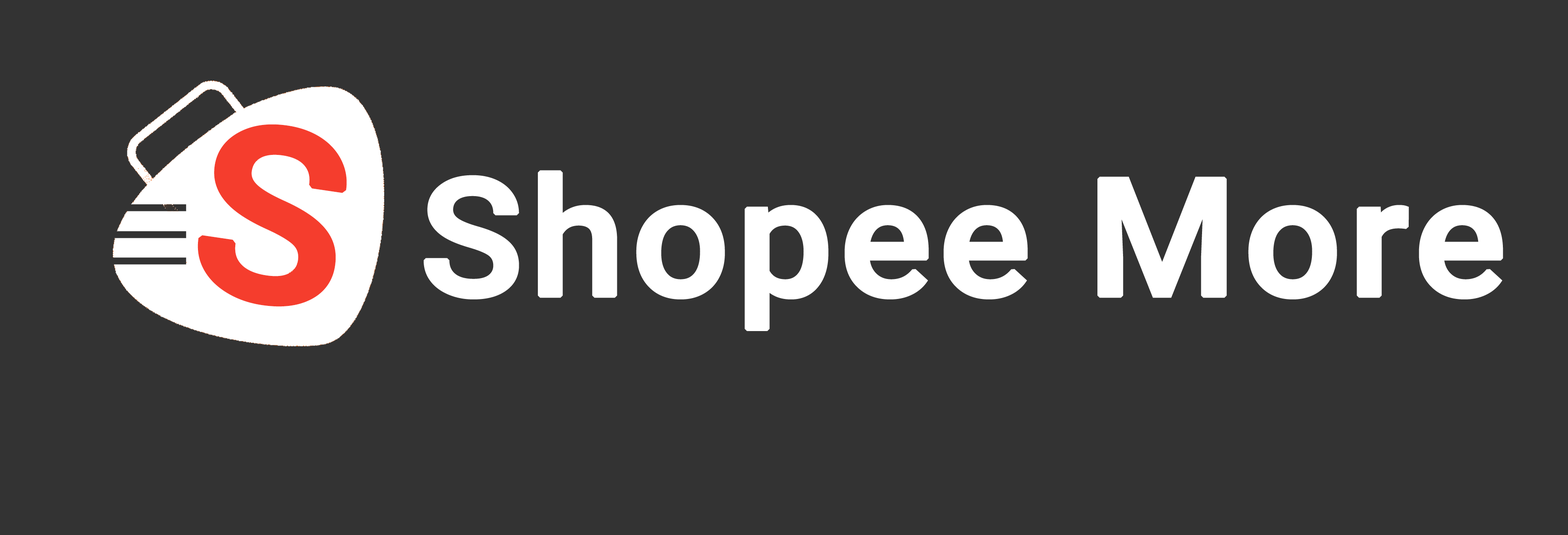
<style>
.page{position:relative;width:1568px;height:535px;background:#333333}
.page>*{position:absolute;margin:0}
.t1{font:239.2px "Roboto-Medium";letter-spacing:0.015em;color:#f53d2d;font-weight:bold;scale:1.04 1}
.t2{font:163.9px "Roboto-Medium";letter-spacing:0.015em;color:#ffffff;font-weight:bold;scale:1.04 1}
</style>
<div class="page">
<p class="t1" style="left:198px;top:124px;width:149px;height:183px;rotate:8deg">S</p>
<p class="t2" style="left:424px;top:170px;width:1079px;height:161px">Shopee More</p>
</div>
